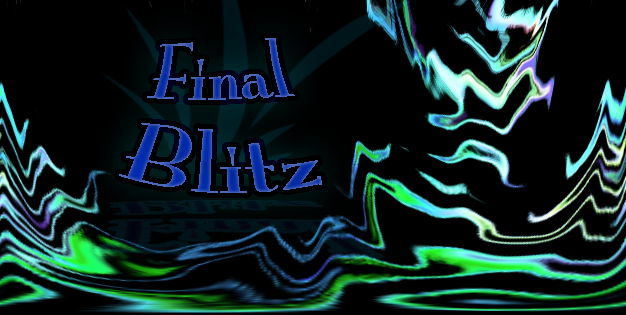
<style>
.page{position:relative;width:626px;height:315px;background:#000000}
.page>*{position:absolute;margin:0}
.t1{font:72px "MonaLisaSolidITCTT"}
</style>
<div class="page">
<p class="t1" style="left:119px;top:38px;width:203px;height:155px;text-align:center">Final<br>Blitz</p>
<p class="t1" style="left:119px;top:38px;width:203px;height:155px;text-align:center">Final<br>Blitz</p>
</div>
